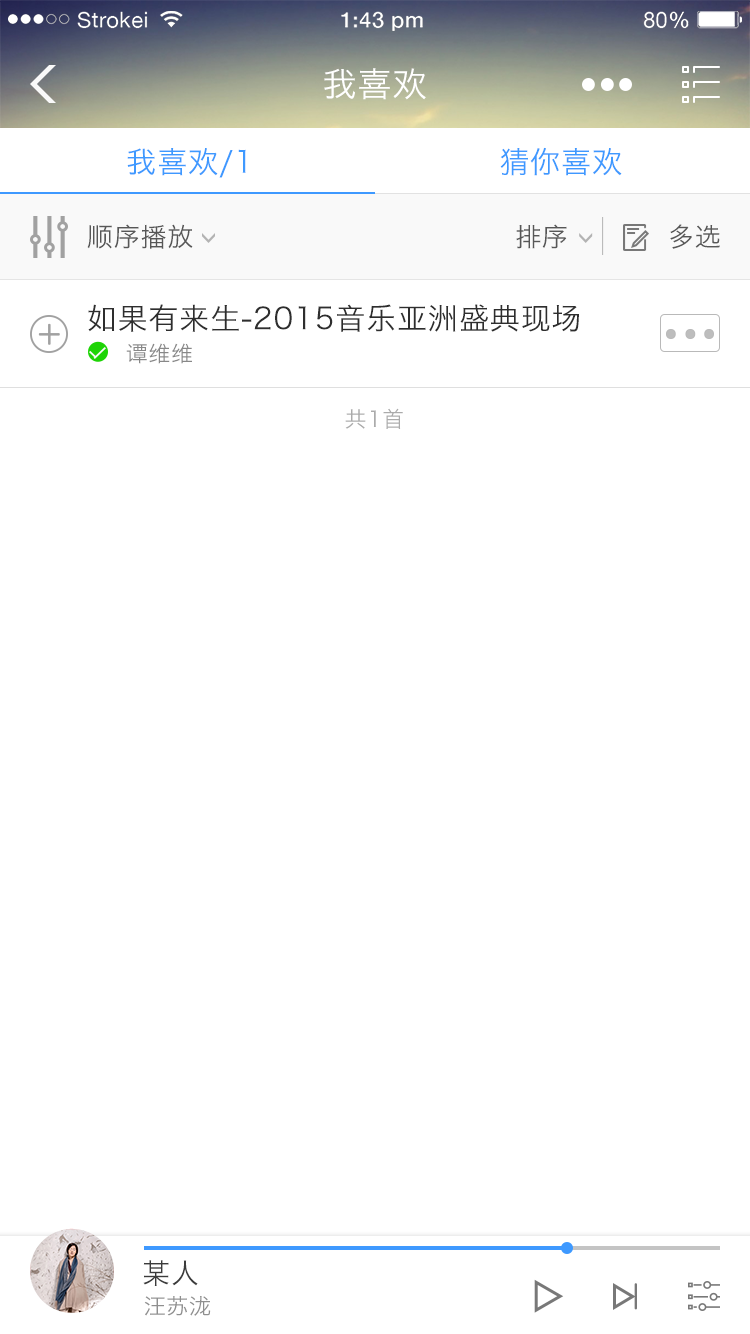
<style>
.page{position:relative;width:750px;height:1334px;background:#ffffff}
.page>*{position:absolute;margin:0}
.t1{font:34px "HiraginoSansGB-W3";letter-spacing:0.03em;color:#ffffff}
.t2{font:30px "HiraginoSansGB-W3";letter-spacing:0.03em;color:#3e99ff}
.t3{font:26px "HiraginoSansGB-W3";letter-spacing:0.03em;color:#575757}
.t4{font:29.9px "HiraginoSansGB-W3";letter-spacing:0.03em;color:#2e2e2e}
.t5{font:21.9px "HiraginoSansGB-W3";letter-spacing:0.03em;color:#888888}
.t6{font:22px "HiraginoSansGB-W3";letter-spacing:0.03em;color:#aaaaaa}
.t7{font:28px "HiraginoSansGB-W3";letter-spacing:0.03em;color:#3b3b3b}
.t8{font:22px "HiraginoSansGB-W3";letter-spacing:0.03em;color:#8f8f8f}
</style>
<div class="page">
<p class="t1" style="left:324px;top:68px;width:102px;height:32px">我喜欢</p>
<p class="t2" style="left:127px;top:148px;width:119px;height:30px">我喜欢/1</p>
<p class="t2" style="left:500px;top:147px;width:122px;height:29px">猜你喜欢</p>
<p class="t3" style="left:87px;top:224px;width:106px;height:25px">顺序播放</p>
<p class="t3" style="left:516px;top:224px;width:51px;height:25px">排序</p>
<p class="t3" style="left:670px;top:224px;width:50px;height:25px">多选</p>
<p class="t4" style="left:88px;top:304px;width:491px;height:28px">如果有来生-2015音乐亚洲盛典现场</p>
<p class="t5" style="left:126px;top:343px;width:66px;height:21px">谭维维</p>
<p class="t6" style="left:345px;top:408px;width:58px;height:21px">共1首</p>
<p class="t7" style="left:143px;top:1260px;width:55px;height:26px">某人</p>
<p class="t8" style="left:144px;top:1296px;width:67px;height:20px">汪苏泷</p>
</div>
